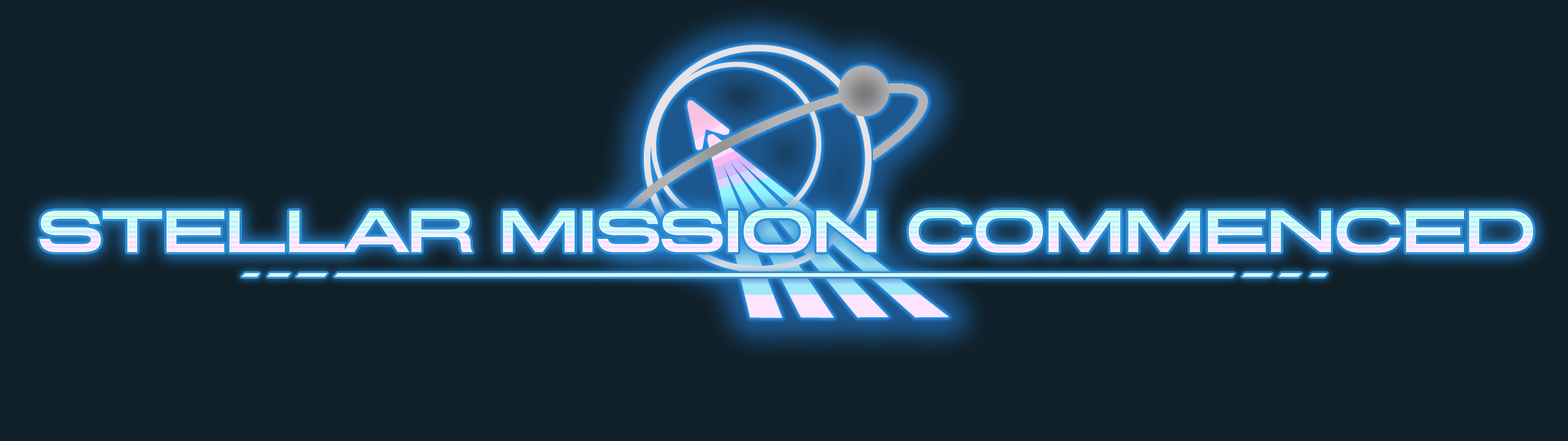
<style>
.page{position:relative;width:1568px;height:441px;background:#102029}
.page>*{position:absolute;margin:0}
.t1{font:58.9px "MiedingerRus-Medium"}
</style>
<div class="page">
<p class="t1" style="left:39px;top:210px;width:1494px;height:43px">STELLAR MISSION COMMENCED</p>
<p class="t1" style="left:39px;top:210px;width:1494px;height:43px">STELLAR MISSION COMMENCED</p>
<p class="t1" style="left:39px;top:210px;width:1494px;height:43px">STELLAR MISSION COMMENCED</p>
</div>
